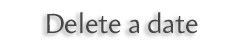
<style>
.page{position:relative;width:246px;height:48px;background:#ffffff}
.page>*{position:absolute;margin:0}
.t1{font:28px "Amira-Roman";color:#474747}
</style>
<div class="page">
<p class="t1" style="left:47px;top:12px;width:151px;height:22px">Delete a date</p>
</div>
